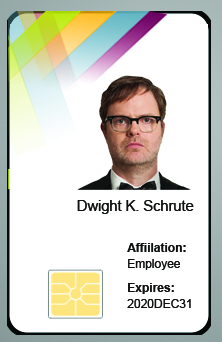
<style>
.page{position:relative;width:222px;height:342px;background:#ffffff}
.page>*{position:absolute;margin:0}
.t1{font:14.6px "ArialMT";color:#0f1111}
.t2{font:12px/16px "Arial-BoldMT";color:#0f1111}
.t3{font:12px/16px "ArialMT";color:#0f1111}
</style>
<div class="page">
<p class="t1" style="left:77px;top:200px;width:117px;height:14px">Dwight K. Schrute</p>
<p class="t2" style="left:127px;top:243px;width:59px;height:27px">Affiilation:<br><span class="t3">Employee</span></p>
<p class="t3" style="left:127px;top:283px;width:64px;height:25px"><span class="t2">Expires:<br></span>2020DEC31</p>
</div>
